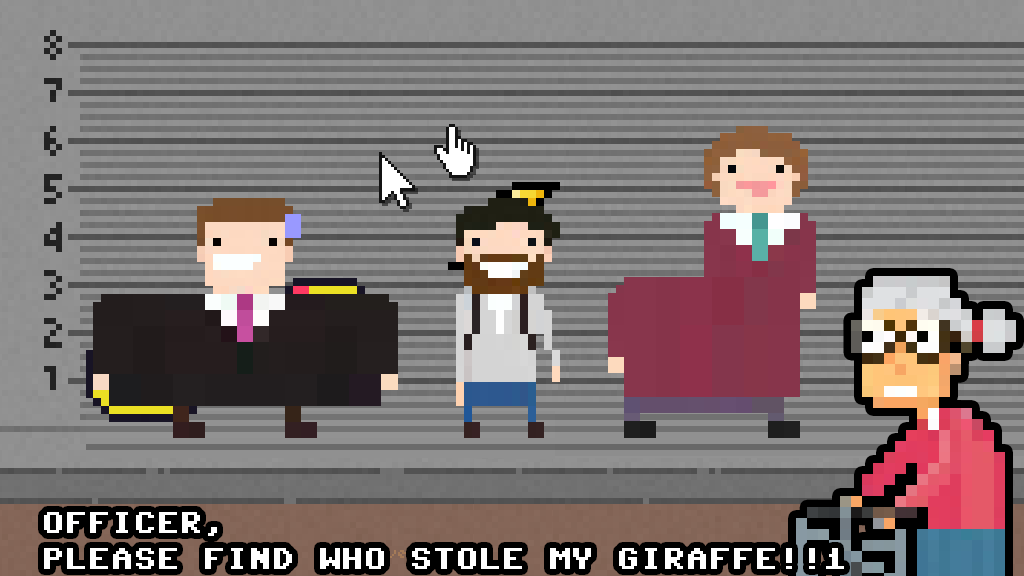
<style>
.page{position:relative;width:1024px;height:576px}
.page>*{position:absolute;margin:0}
.t1{font:30px "Commodore64";color:#ffffff}
</style>
<div class="page">
<p class="t1" style="left:44px;top:512px;width:800px;height:57px">OFFICER,<br>PLEASE FIND WHO STOLE MY GIRAFFE!!1</p>
</div>
